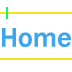
<style>
.page{position:relative;width:72px;height:72px;background:#ffffff}
.page>*{position:absolute;margin:0}
.t1{font:28px "FranklinGothic-Medium";color:#3da5ee}
</style>
<div class="page">
<p class="t1" style="left:2px;top:28px;width:69px;height:19px">Home</p>
</div>
